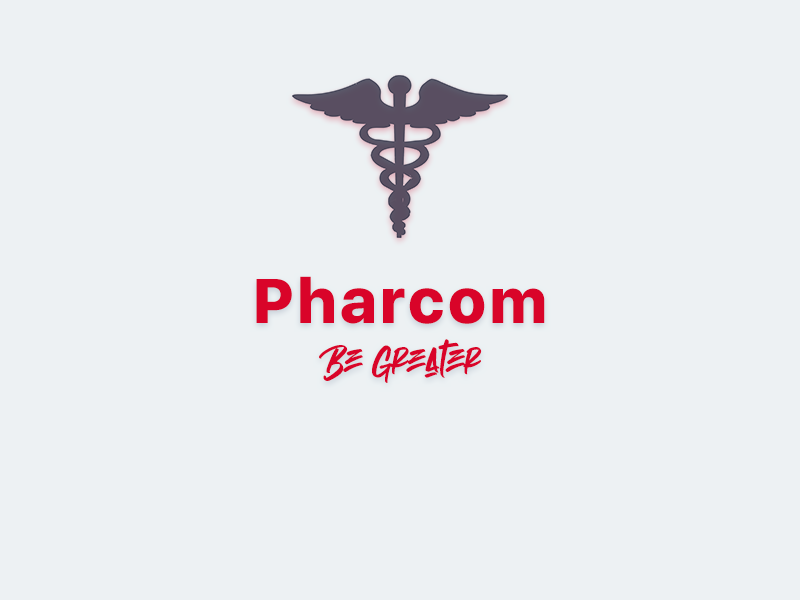
<style>
.page{position:relative;width:800px;height:600px;background:#edf1f3}
.page>*{position:absolute;margin:0}
.t1{font:62.5px "SFUIDisplay-Heavy";letter-spacing:0.06em;color:#d90429}
.t2{font:50px "EmpiresRegular";color:#d90429}
</style>
<div class="page">
<p class="t1" style="left:256px;top:276px;width:289px;height:48px">Pharcom</p>
<p class="t2" style="left:319px;top:339px;width:163px;height:44px">Be Greater</p>
</div>
